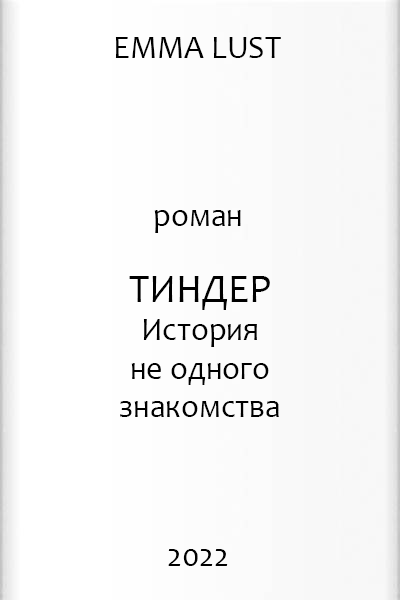
<style>
.page{position:relative;width:400px;height:600px;background:#ffffff}
.page>*{position:absolute;margin:0}
.t1{font:32px "Candara";color:#000000}
.t2{font:40px "Candara";color:#000000}
</style>
<div class="page">
<p class="t1" style="left:115px;top:37px;width:166px;height:21px">EMMA LUST</p>
<p class="t1" style="left:154px;top:210px;width:87px;height:23px">роман</p>
<p class="t1" style="left:120px;top:276px;width:159px;height:141px;text-align:center"><span class="t2">ТИНДЕР<br></span>История<br>не одного<br>знакомства</p>
<p class="t1" style="left:168px;top:549px;width:60px;height:17px">2022</p>
</div>
